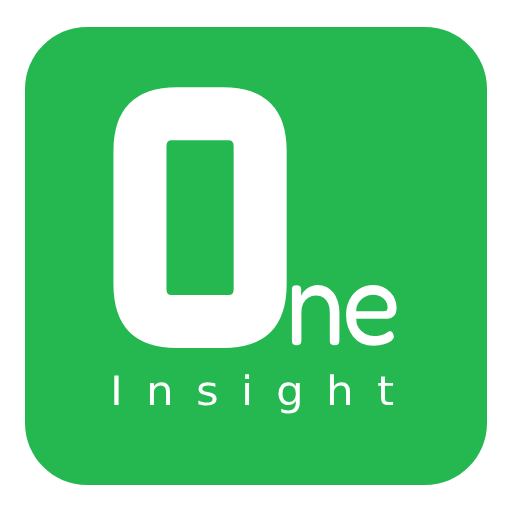
<style>
.page{position:relative;width:512px;height:512px;background:#25b851}
.page>*{position:absolute;margin:0}
.t1{font:123.9px "Fredoka-Regular";letter-spacing:-0.029em;color:#ffffff;scale:0.88 1}
.t2{font:398.1px "GemunuLibre-ExtraBold";letter-spacing:-0.06em;color:#ffffff;scale:0.89 1}
.t3{font:40.4px "DejaVuSans";letter-spacing:0.516em;color:#ffffff;scale:1.08 1}
</style>
<div class="page">
<p class="t1" style="left:113px;top:87px;width:284px;height:261px"><span class="t2">O</span>ne</p>
<p class="t3" style="left:114px;top:374px;width:280px;height:40px">Insight</p>
</div>
